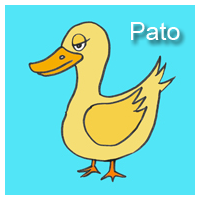
<style>
.page{position:relative;width:200px;height:200px;background:#52e5f7}
.page>*{position:absolute;margin:0}
.t1{font:25px "ArialMT";color:#ffffff}
</style>
<div class="page">
<p class="t1" style="left:131px;top:22px;width:49px;height:18px">Pato</p>
</div>
